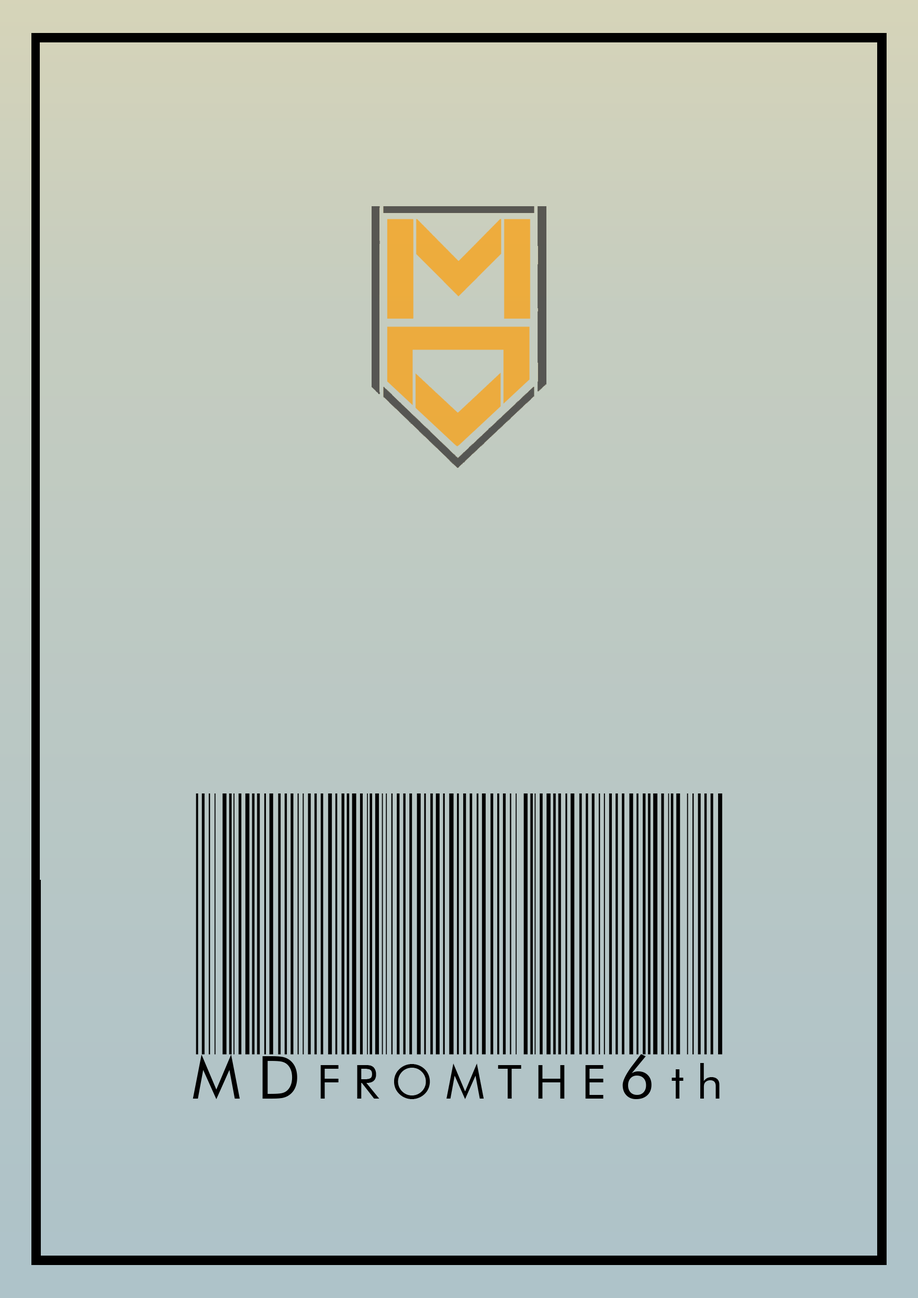
<style>
.page{position:relative;width:918px;height:1298px}
.page>*{position:absolute;margin:0}
.t1{font:47.1px "FuturaBT-Book";letter-spacing:0.275em;color:#000000}
.t2{font:59.2px "FuturaBT-Book";letter-spacing:0.275em;color:#000000}
.t3{font:61.1px "FuturaBT-Book";letter-spacing:0.275em;color:#000000}
</style>
<div class="page">
<p class="t1" style="left:193px;top:1054px;width:527px;height:46px"><span class="t2">MD</span>FROMTHE<span class="t3">6</span>th</p>
</div>
